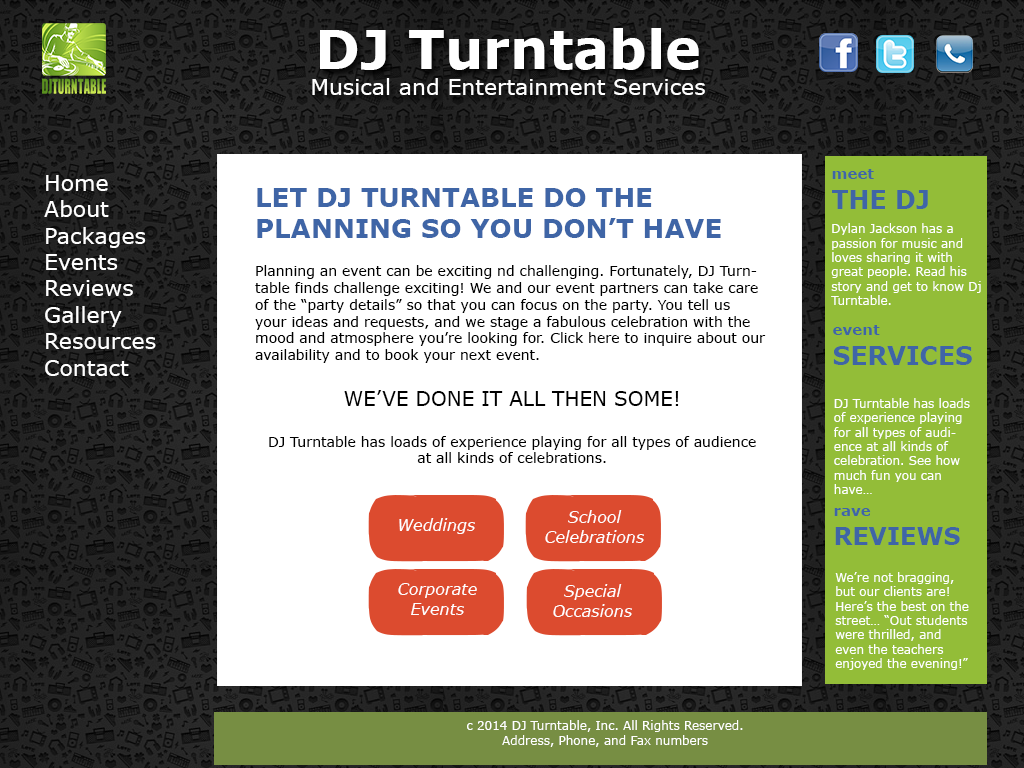
<style>
.page{position:relative;width:1024px;height:768px;background:#ffffff}
.page>*{position:absolute;margin:0}
.t1{font:22px "Verdana";color:#ffffff}
.t2{font:54px "Verdana-Bold";color:#ffffff}
.t3{font:25px "Verdana-Bold";color:#3f65a6}
.t4{font:17px "Verdana-Bold";color:#3f65a6}
.t5{font:15px "Verdana-Bold";color:#3f65a6}
.t6{font:26px "Verdana-Bold";color:#3f65a6}
.t7{font:26px "Verdana-Bold";color:#d05b4c}
.t8{font:12px "Verdana";color:#ffffff}
.t9{font:12px "Verdana-Bold";color:#ffffff}
.t10{font:14px "Verdana";color:#000000}
.t11{font:20px "Verdana";color:#000000;text-transform:uppercase}
.t12{font:16px "Verdana-Italic";color:#ffffff}
.t13{font:24px "Verdana-Bold";color:#3f65a6}
</style>
<div class="page">
<p class="t1" style="left:312px;top:28px;width:393px;height:67px;text-align:center"><span class="t2">DJ Turntable<br></span>Musical and Entertainment Services</p>
<p class="t3" style="left:832px;top:169px;width:96px;height:40px"><span class="t4"><br></span><span class="t5">meet<br></span>THE DJ</p>
<p class="t1" style="left:44px;top:175px;width:112px;height:201px">Home<br>About<br>Packages<br>Events<br>Reviews<br>Gallery<br>Resources<br>Contact</p>
<p class="t6" style="left:257px;top:188px;width:464px;height:50px">LET DJ TURNTABLE DO THE<br>PLANNING SO YOU DON’T HAVE <span class="t7">TO</span></p>
<p class="t8" style="left:831px;top:223px;width:150px;height:82px;text-align:center"><span class="t9"><br></span>Dylan Jackson has a passion for music and loves sharing it with great people. Read his story and get to know Dj Turntable.</p>
<p class="t10" style="left:255px;top:265px;width:511px;height:98px">Planning an event can be exciting nd challenging. Fortunately, DJ Turntable finds challenge exciting! We and our event partners can take care of the “party details” so that you can focus on the party. You tell us your ideas and requests, and we stage a fabulous celebration with the mood and atmosphere you’re looking for. Click here to inquire about our availability and to book your next event.</p>
<p class="t3" style="left:833px;top:325px;width:139px;height:40px"><span class="t4"><br></span><span class="t5">event<br></span>SERVICES</p>
<p class="t10" style="left:269px;top:390px;width:487px;height:73px;text-align:center"><span class="t11">We’ve done it all then some!<br><br></span>DJ Turntable has loads of experience playing for all types of audience at all kinds of celebrations.</p>
<p class="t8" style="left:834px;top:398px;width:136px;height:96px">DJ Turntable has loads of experience playing for all types of audience at all kinds of celebration. See how much fun you can have…</p>
<p class="t12" style="left:545px;top:510px;width:99px;height:33px;text-align:center">School <br>Celebrations</p>
<p class="t13" style="left:834px;top:508px;width:126px;height:37px"><span class="t4"><br></span><span class="t5">rave<br></span>REVIEWS</p>
<p class="t12" style="left:399px;top:518px;width:76px;height:16px">Weddings</p>
<p class="t8" style="left:835px;top:572px;width:134px;height:98px">We’re not bragging, but our clients are! Here’s the best on the street… “Out students were thrilled, and even the teachers enjoyed the evening!”</p>
<p class="t12" style="left:398px;top:583px;width:79px;height:32px;text-align:center">Corporate Events</p>
<p class="t12" style="left:553px;top:584px;width:79px;height:33px;text-align:center">Special <br>Occasions</p>
<p class="t8" style="left:467px;top:720px;width:276px;height:27px;text-align:center">c 2014 DJ Turntable, Inc. All Rights Reserved.<br>Address, Phone, and Fax numbers<br>DJ_Turntable email address</p>
</div>
